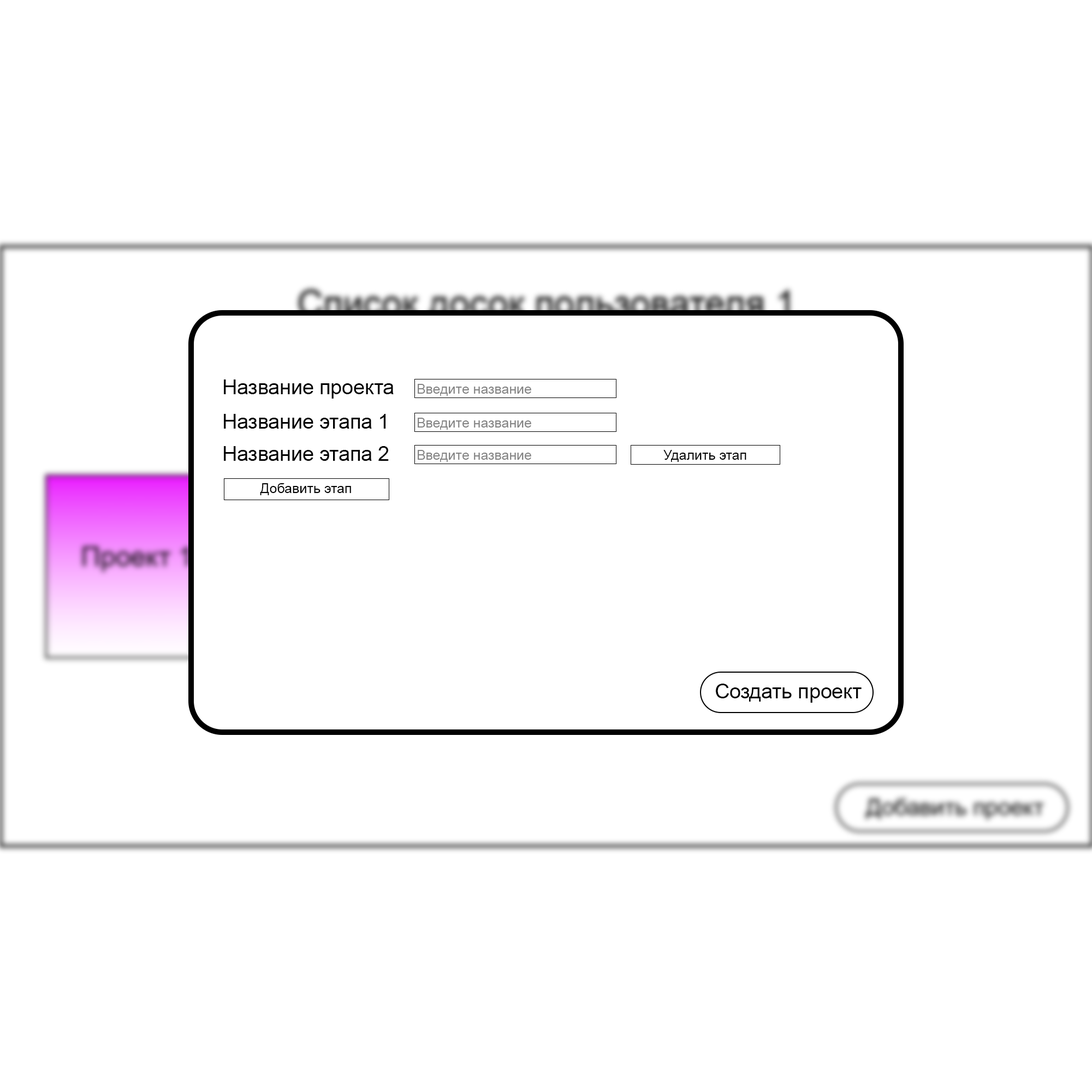
<style>
.page{position:relative;width:1092px;height:1092px;background:#ffffff}
.page>*{position:absolute;margin:0}
.t1{font:20.5px "ArialMT";color:#000000}
.t2{font:13.6px "ArialMT";color:#848484}
.t3{font:13.6px "ArialMT";color:#000000}
</style>
<div class="page">
<p class="t1" style="left:224px;top:379px;width:170px;height:20px">Название проекта</p>
<p class="t2" style="left:418px;top:384px;width:113px;height:12px">Введите название</p>
<p class="t1" style="left:224px;top:414px;width:162px;height:15px">Название этапа 1</p>
<p class="t2" style="left:418px;top:418px;width:113px;height:12px">Введите название</p>
<p class="t1" style="left:224px;top:446px;width:165px;height:15px">Название этапа 2</p>
<p class="t2" style="left:418px;top:450px;width:113px;height:12px">Введите название</p>
<p class="t3" style="left:663px;top:450px;width:83px;height:12px">Удалить этап</p>
<p class="t3" style="left:260px;top:483px;width:91px;height:12px">Добавить этап</p>
<p class="t1" style="left:716px;top:684px;width:146px;height:19px">Создать проект</p>
</div>
